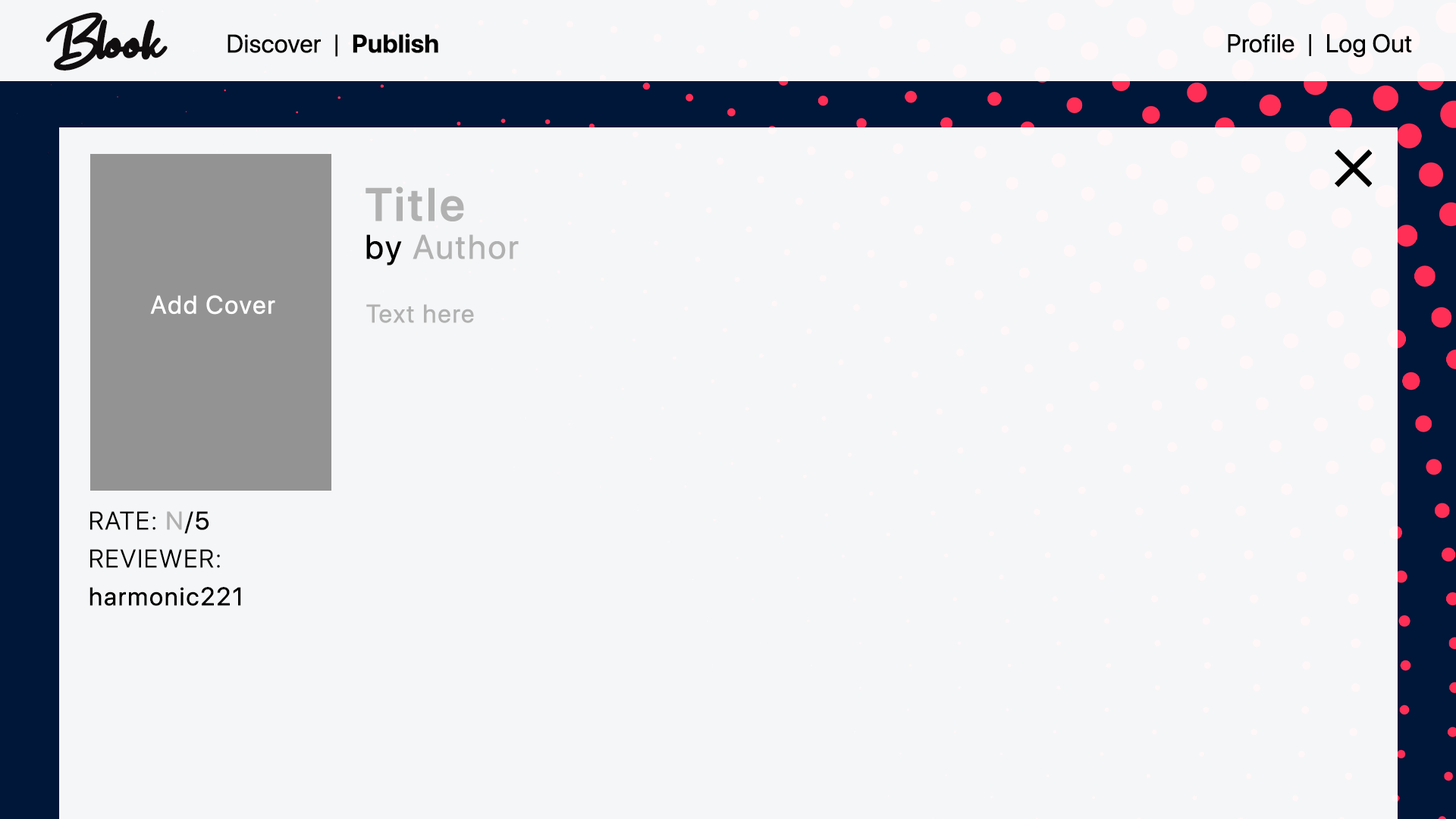
<style>
.page{position:relative;width:1456px;height:819px;background:#f5f6f7}
.page>*{position:absolute;margin:0}
.t1{font:74.5px "Get-Show";letter-spacing:-0.05em;color:#110e0f;font-weight:bold}
.t2{font:74.5px "Get-Show";letter-spacing:-0.075em;color:#110e0f;font-weight:bold}
.t3{font:25.3px "SFProDisplay-Regular";color:#000000;font-weight:bold}
.t4{font:25.3px "SFProDisplay-Bold";color:#000000;font-weight:bold}
.t5{font:33.7px/37.9px "SFProDisplay-Regular";letter-spacing:0.05em;color:#b1b1b1;font-weight:bold}
.t6{font:46.3px/37.9px "SFProDisplay-Semibold";letter-spacing:0.05em;color:#b1b1b1;font-weight:bold}
.t7{font:33.7px/37.9px "SFProDisplay-Regular";letter-spacing:0.05em;color:#000000;font-weight:bold}
.t8{font:25.3px "SFProDisplay-Regular";letter-spacing:0.05em;color:#ffffff;font-weight:bold}
.t9{font:25.3px "SFProDisplay-Regular";letter-spacing:0.05em;color:#b1b1b1;font-weight:bold}
.t10{font:25.3px/37.9px "SFProDisplay-Regular";letter-spacing:0.05em;color:#000000;font-weight:bold}
.t11{font:25.3px/37.9px "SFProDisplay-Light";letter-spacing:0.05em;color:#000000;font-weight:bold}
.t12{font:25.3px/37.9px "SFProDisplay-Regular";letter-spacing:0.05em;color:#b1b1b1;font-weight:bold}
</style>
<div class="page">
<p class="t1" style="left:45px;top:12px;width:123px;height:59px"><span class="t2">B</span>look</p>
<p class="t3" style="left:227px;top:33px;width:211px;height:24px">Discover  |  <span class="t4">Publish</span></p>
<p class="t3" style="left:1228px;top:33px;width:184px;height:25px">Profile  |  Log Out</p>
<p class="t5" style="left:366px;top:187px;width:153px;height:78px"><span class="t6">Title<br></span><span class="t7">by </span>Author</p>
<p class="t8" style="left:150px;top:295px;width:125px;height:20px">Add Cover</p>
<p class="t9" style="left:366px;top:304px;width:108px;height:19px">Text here</p>
<p class="t10" style="left:89px;top:511px;width:152px;height:95px"><span class="t11">RATE: </span><span class="t12">N</span>/5<br><span class="t11">REVIEWER:<br></span>harmonic221</p>
</div>
